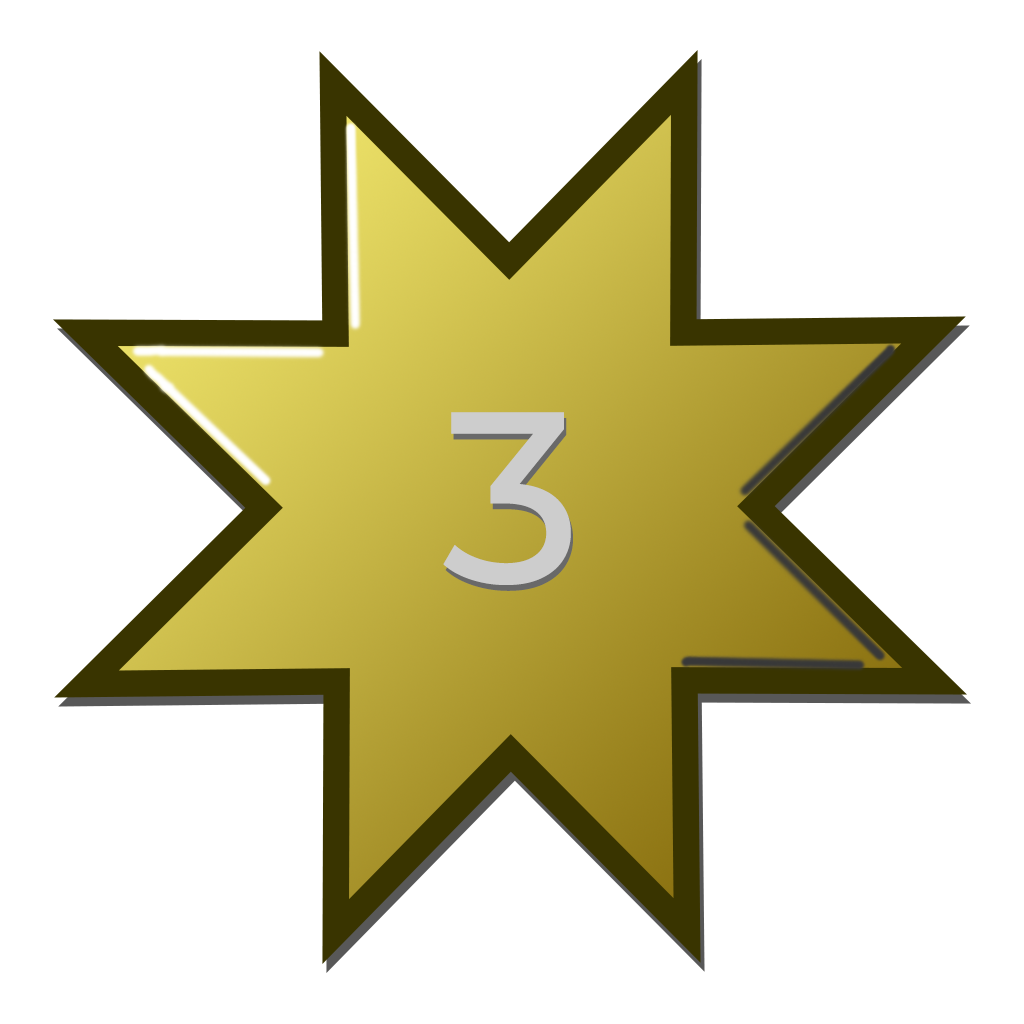
<style>
.page{position:relative;width:1024px;height:1024px;background:#ffffff}
.page>*{position:absolute;margin:0}
.t1{font:243.7px "Montserrat-Medium";color:#cdcdcd}
</style>
<div class="page">
<p class="t1" style="left:443px;top:412px;width:128px;height:173px">3</p>
<p class="t1" style="left:445px;top:418px;width:128px;height:173px">3</p>
</div>
